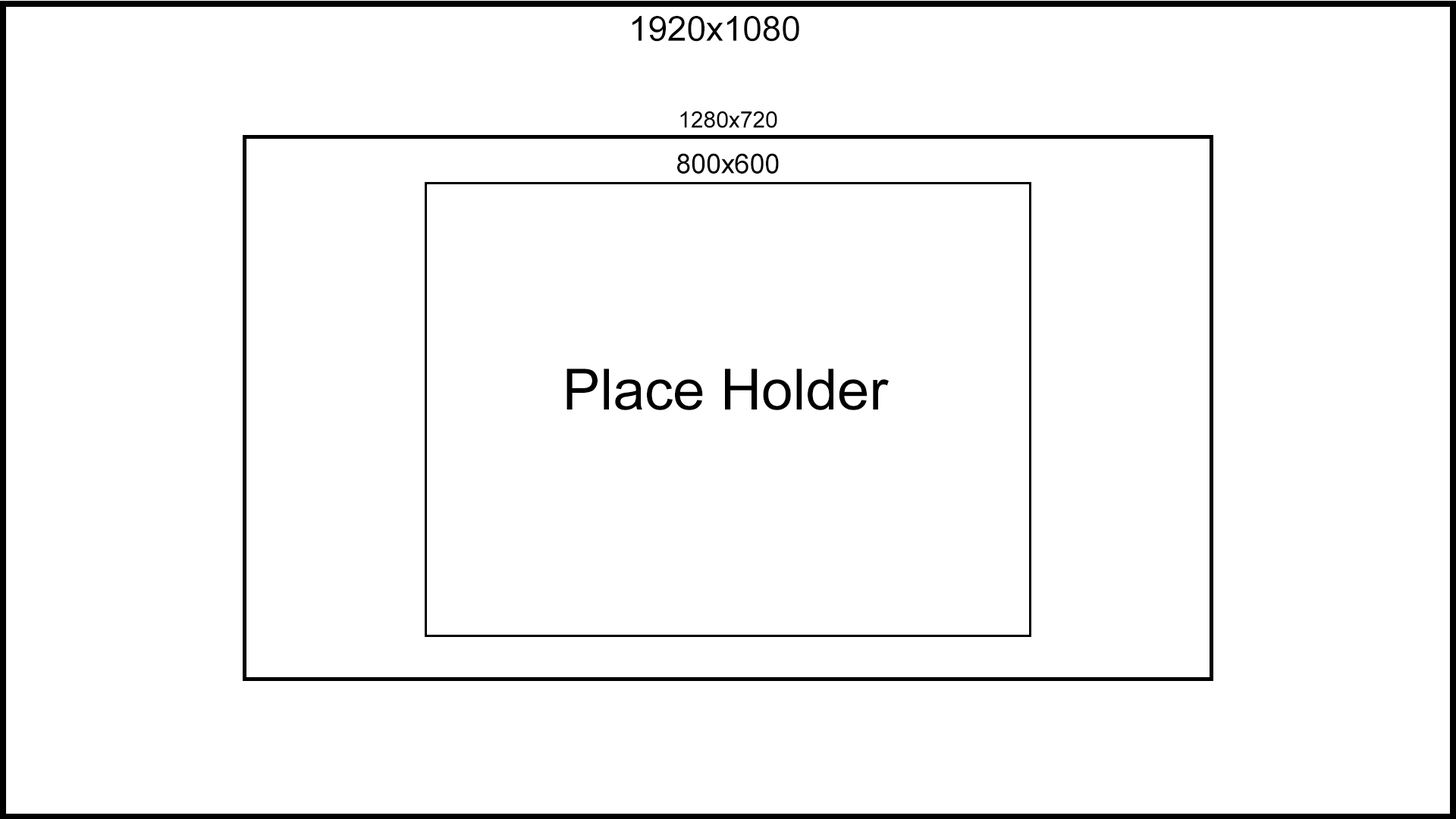
<style>
.page{position:relative;width:1456px;height:819px;background:#ffffff}
.page>*{position:absolute;margin:0}
.t1{font:34.8px "ArialMT";color:#000000}
.t2{font:22.7px "ArialMT";color:#000000}
.t3{font:27.1px "ArialMT";color:#000000}
.t4{font:56.9px "ArialMT";color:#000000}
</style>
<div class="page">
<p class="t1" style="left:632px;top:16px;width:167px;height:26px">1920x1080</p>
<p class="t2" style="left:680px;top:111px;width:97px;height:17px">1280x720</p>
<p class="t3" style="left:677px;top:153px;width:102px;height:21px">800x600</p>
<p class="t4" style="left:566px;top:369px;width:323px;height:41px">Place Holder</p>
</div>
